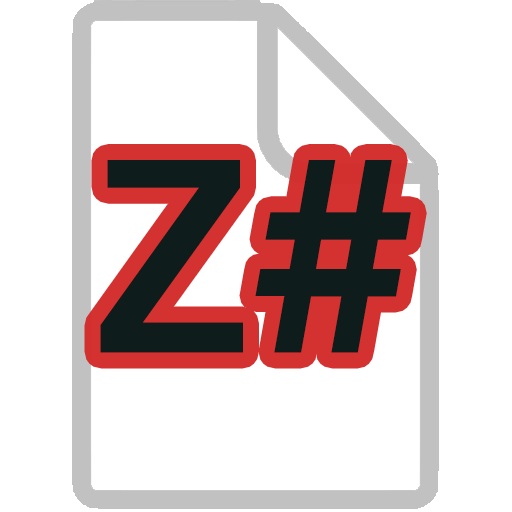
<style>
.page{position:relative;width:512px;height:512px;background:#ffffff}
.page>*{position:absolute;margin:0}
.t1{font:288.6px "FranklinGothic-Medium";color:#0e1c1c}
</style>
<div class="page">
<p class="t1" style="left:100px;top:160px;width:311px;height:193px">Z#</p>
</div>
